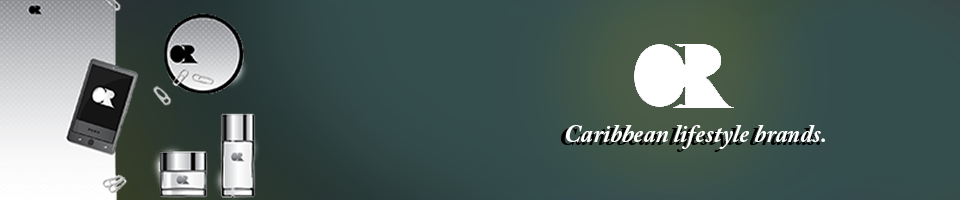
<style>
.page{position:relative;width:960px;height:200px}
.page>*{position:absolute;margin:0}
.t1{font:25px "ACaslonPro-BoldItalic";color:#ffffff}
</style>
<div class="page">
<p class="t1" style="left:566px;top:125px;width:259px;height:24px">Caribbean lifestyle brands.</p>
</div>
